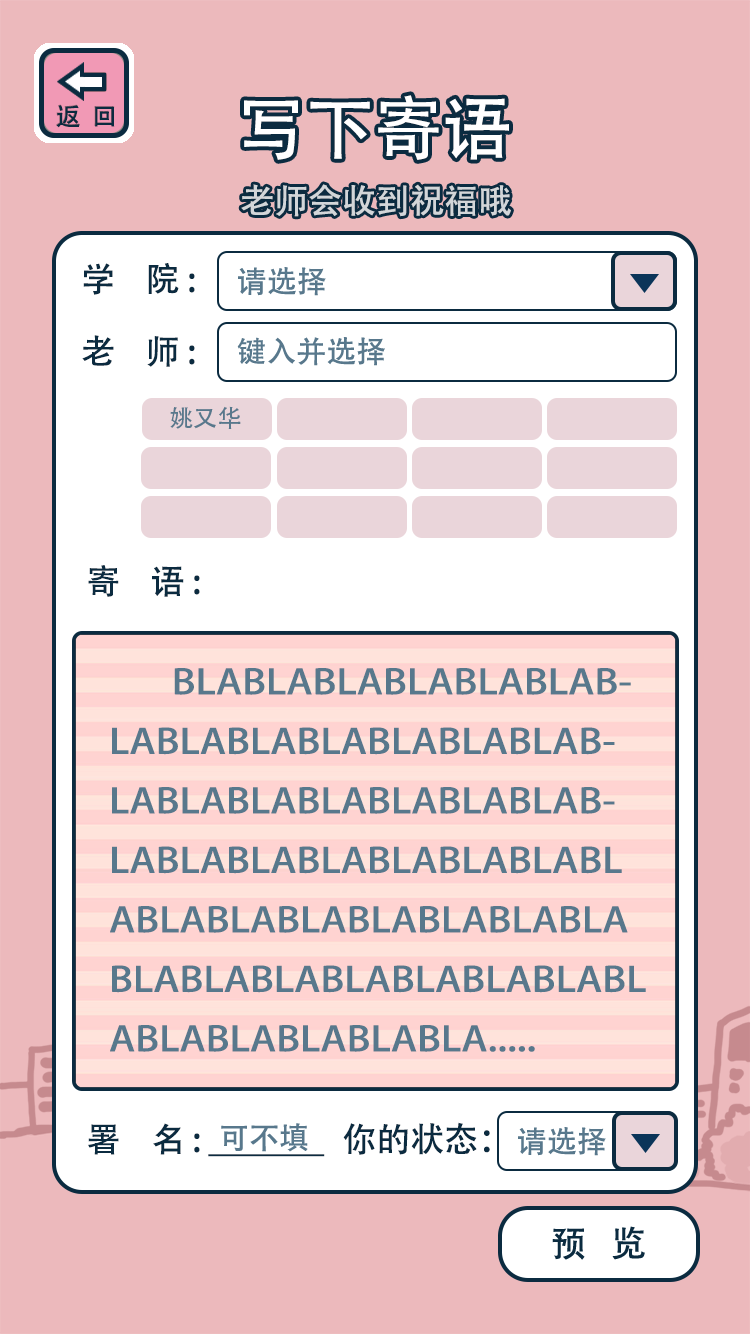
<style>
.page{position:relative;width:750px;height:1334px;background:#ecb9bc}
.page>*{position:absolute;margin:0}
.t1{font:69px "AdobeHeitiStd-Regular";color:#ffffff}
.t2{font:34px "AdobeHeitiStd-Regular";color:#d2d6d9}
.t3{font:34px "AdobeHeitiStd-Regular";color:#0b2b40}
.t4{font:30px "AdobeHeitiStd-Regular";color:#58788c}
.t5{font:34px "STFangsong";color:#0b2b40}
.t6{font:24px "AdobeHeitiStd-Regular";color:#58788c}
.t7{font:34px "AdobeHeitiStd-Regular";color:#58788c;scale:1.17 1}
.t8{font:36px "AdobeHeitiStd-Regular";color:#0b2b40}
</style>
<div class="page">
<p class="t1" style="left:244px;top:95px;width:265px;height:65px">写下寄语</p>
<p class="t2" style="left:241px;top:184px;width:270px;height:33px">老师会收到祝福哦</p>
<p class="t3" style="left:83px;top:263px;width:112px;height:32px">学    院 :</p>
<p class="t4" style="left:238px;top:267px;width:88px;height:29px"><span class="t5"><br><br></span>请选择</p>
<p class="t3" style="left:82px;top:335px;width:113px;height:32px">老    师 :</p>
<p class="t4" style="left:237px;top:337px;width:148px;height:29px"><span class="t5"><br><br></span>键入并选择</p>
<p class="t6" style="left:170px;top:406px;width:71px;height:23px">姚又华</p>
<p class="t3" style="left:88px;top:565px;width:112px;height:32px">寄    语 :</p>
<p class="t7" style="left:110px;top:668px;width:536px;height:384px">BLABLABLABLABLABLABLABLABLABLABLABLABLABLABLABLABLABLABLABLABLABLABLABLABLABLABLABLABLABLABLABLABLABLABLABLABLABLABLABLABLABLABLABLABLABLABLABLA.....</p>
<p class="t3" style="left:88px;top:1123px;width:237px;height:34px">署    名 : ______</p>
<p class="t4" style="left:221px;top:1123px;width:87px;height:29px"><span class="t5"><br><br></span>可不填</p>
<p class="t3" style="left:343px;top:1122px;width:147px;height:33px">你的状态：</p>
<p class="t4" style="left:518px;top:1127px;width:88px;height:29px"><span class="t5"><br><br></span>请选择</p>
<p class="t8" style="left:552px;top:1226px;width:93px;height:34px"><span class="t5"><br><br><br></span>预   览</p>
</div>
